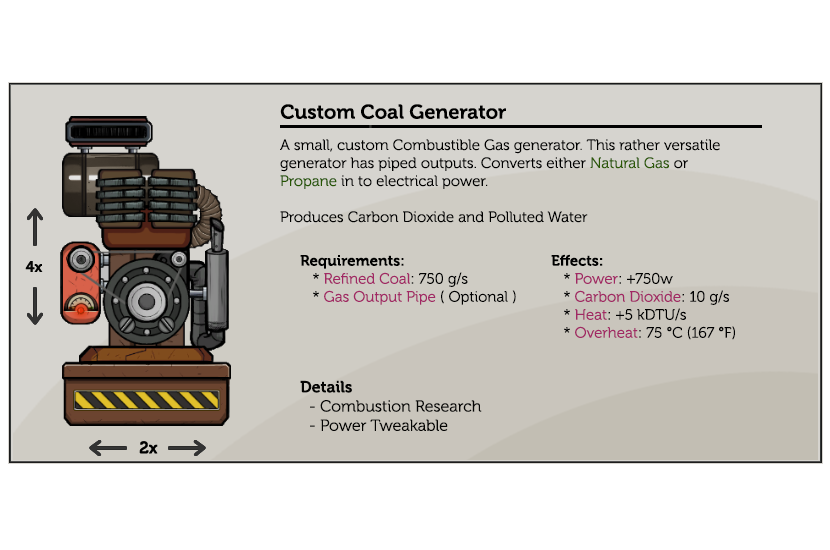
<style>
.page{position:relative;width:830px;height:550px;background:#ffffff}
.page>*{position:absolute;margin:0}
.t1{font:20px "Museo-700";color:#000000}
.t2{font:15px "Museo-300";color:#000000}
.t3{font:15px "Museo-300";color:#2c5904}
.t4{font:15px "Museo-300";color:#265601}
.t5{font:15px "Museo-700";color:#000000}
.t6{font:15px "Museo-300";color:#a12864}
.t7{font:16px "Museo-300";color:#040403}
.t8{font:16px "Museo-700";color:#040403}
</style>
<div class="page">
<p class="t1" style="left:280px;top:104px;width:226px;height:15px">Custom Coal Generator</p>
<p class="t2" style="left:280px;top:139px;width:440px;height:84px">A small, custom Combustible Gas generator. This rather versatile generator has piped outputs. Converts either <span class="t3">Natural Gas</span> or <span class="t4">Propane</span> in to electrical power.<br><br>Produces Carbon Dioxide and Polluted Water</p>
<p class="t2" style="left:300px;top:255px;width:216px;height:50px"><span class="t5">Requirements:</span><br>   * <span class="t6">Refined Coal</span>: 750 g/s                    <br>   * <span class="t6">Gas Output Pipe </span>( Optional )</p>
<p class="t2" style="left:551px;top:254px;width:184px;height:86px"><span class="t5">Effects:</span><br>   * <span class="t6">Power</span>: +750w                   <br>   * <span class="t6">Carbon Dioxide</span>: 10 g/s<br>   * <span class="t6">Heat</span>: +5 kDTU/s<br>   * <span class="t6">Overheat</span>: 75 °C (167 °F)</p>
<p class="t7" style="left:300px;top:380px;width:182px;height:51px"><span class="t8">Details<br></span>  - Combustion Research<br>  - Power Tweakable</p>
</div>
